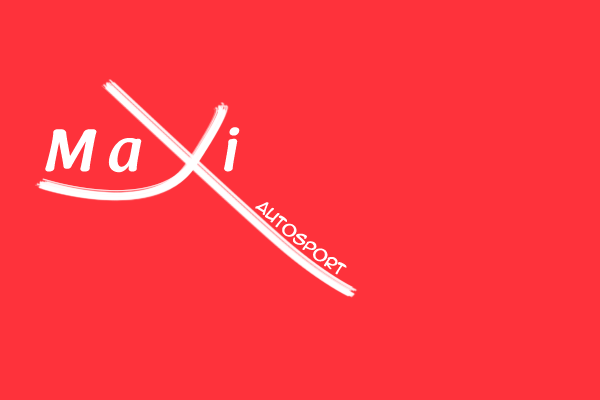
<style>
.page{position:relative;width:600px;height:400px;background:#fe323b}
.page>*{position:absolute;margin:0}
.t1{font:60px "RaspoutineDemiBold";color:#ffffff}
.t2{font:15px "AnimeAce2.0BB";color:#ffffff}
</style>
<div class="page">
<p class="t1" style="left:45px;top:127px;width:195px;height:46px">M a      i</p>
<p class="t2" style="left:255px;top:202px;width:92px;height:73px;rotate:39deg">Autosport</p>
</div>
